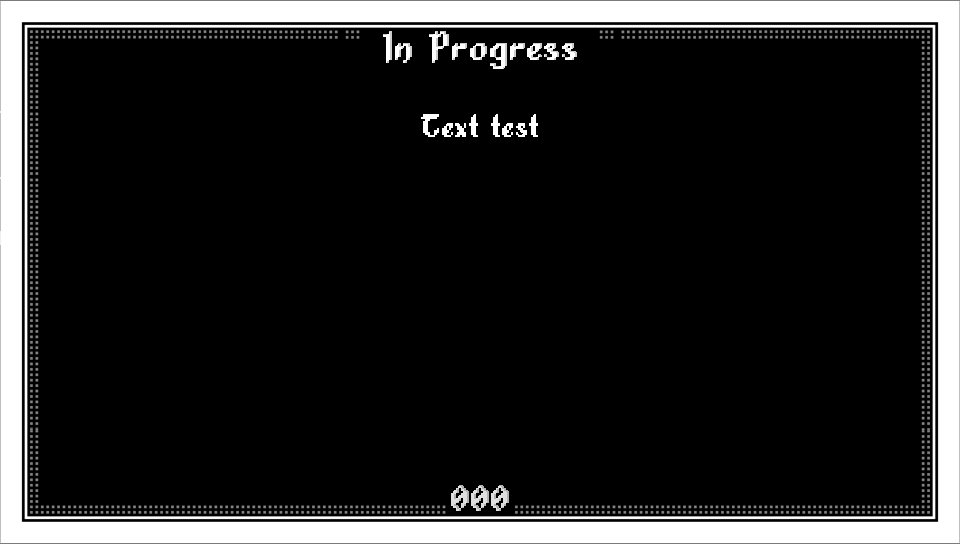
<style>
.page{position:relative;width:960px;height:544px;background:#000000}
.page>*{position:absolute;margin:0}
.t1{font:46px "Alkhemikal";color:#ffffff}
.t2{font:36px "Alkhemikal";color:#ffffff}
.t3{font:40px "Alkhemikal"}
</style>
<div class="page">
<p class="t1" style="left:383px;top:31px;width:194px;height:38px">In Progress</p>
<p class="t2" style="left:421px;top:114px;width:117px;height:23px">Text test</p>
<p class="t3" style="left:451px;top:485px;width:58px;height:26px">000</p>
</div>
